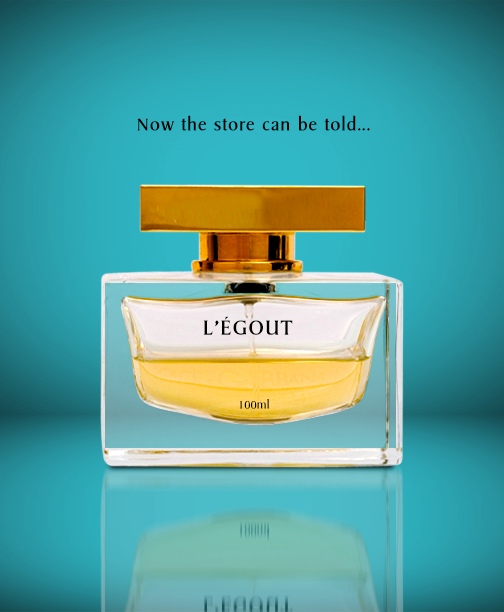
<style>
.page{position:relative;width:504px;height:612px}
.page>*{position:absolute;margin:0}
.t1{font:20px "OperaSF";letter-spacing:0.04em;color:#000000}
.t2{font:24px "OperaSF";letter-spacing:0.06em;color:#000000;text-transform:uppercase}
.t3{font:13px "OperaSF";color:#000000}
</style>
<div class="page">
<p class="t1" style="left:137px;top:115px;width:233px;height:16px">Now the store can be told...</p>
<p class="t2" style="left:203px;top:316px;width:90px;height:19px">L’Égout</p>
<p class="t3" style="left:240px;top:399px;width:29px;height:10px">100ml</p>
</div>
